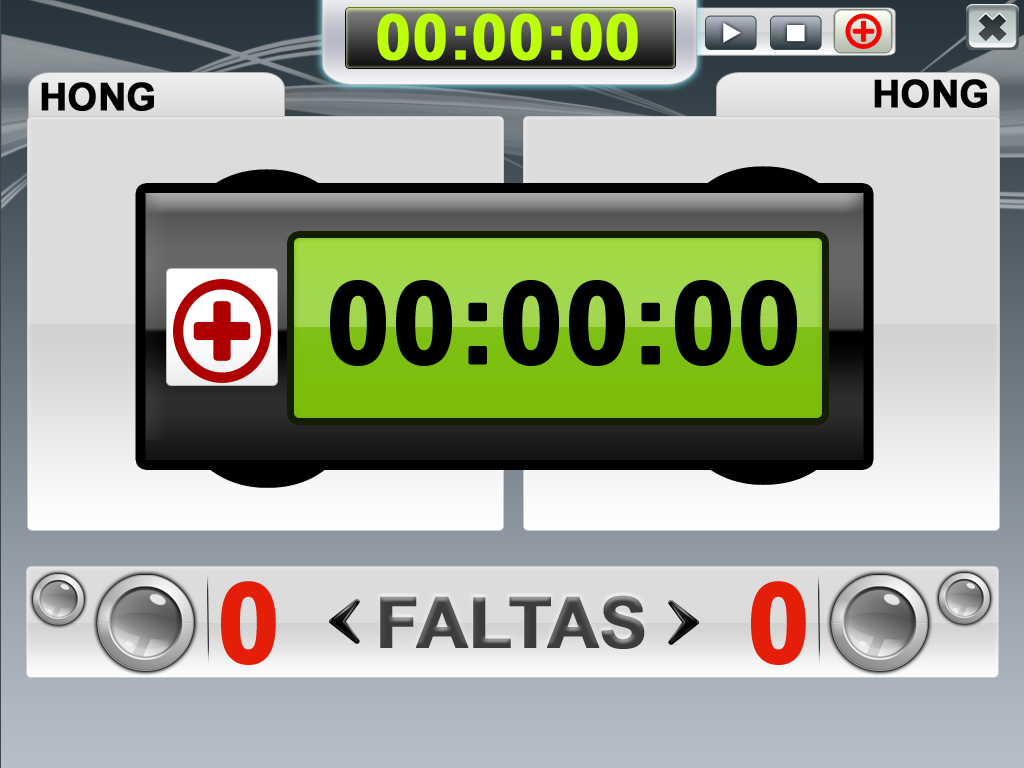
<style>
.page{position:relative;width:1024px;height:768px}
.page>*{position:absolute;margin:0}
.t1{font:63px "Arial-BoldMT";color:#bdff0a;font-weight:bold}
.t2{font:38px "Arial-BoldMT";color:#000000;text-transform:uppercase;font-weight:bold}
.t3{font:113px "Arial-BoldMT";color:#000000;font-weight:bold}
.t4{font:110px "Arial-BoldMT";color:#e51e0a;font-weight:bold}
.t5{font:70px "Arial-BoldMT";color:#3c3c3c;text-transform:uppercase;font-weight:bold}
</style>
<div class="page">
<p class="t1" style="left:377px;top:13px;width:261px;height:48px">00:00:00</p>
<p class="t2" style="left:41px;top:82px;width:113px;height:29px">hong</p>
<p class="t2" style="left:874px;top:79px;width:113px;height:29px">hong</p>
<p class="t3" style="left:330px;top:280px;width:467px;height:86px">00:00:00</p>
<p class="t4" style="left:221px;top:581px;width:55px;height:84px">0</p>
<p class="t4" style="left:751px;top:581px;width:55px;height:84px">0</p>
<p class="t5" style="left:380px;top:595px;width:265px;height:54px">fALTAS</p>
</div>
